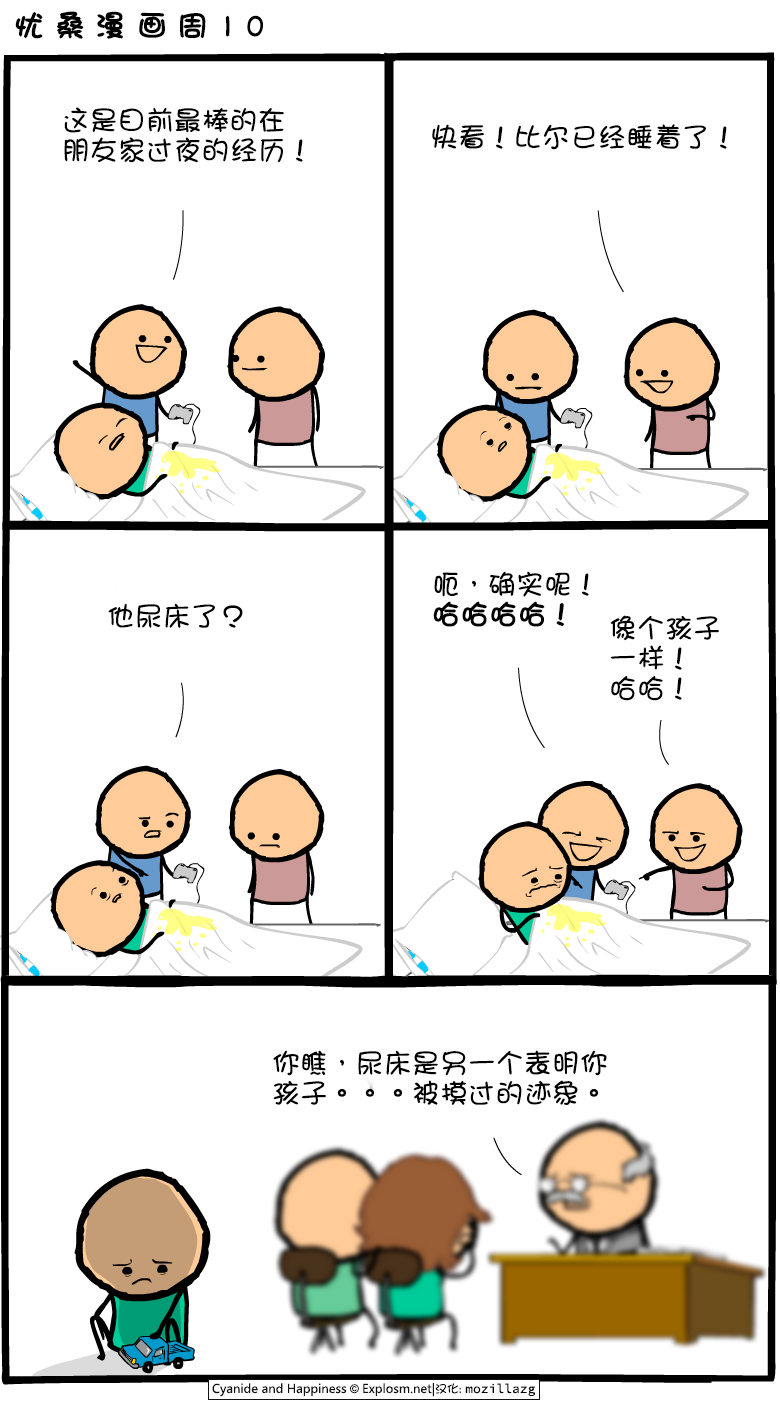
<style>
.page{position:relative;width:780px;height:1405px;background:#ffffff}
.page>*{position:absolute;margin:0}
.t1{font:30px "DFGirl";letter-spacing:0.34em;color:#000000;font-weight:bold}
.t2{font:28px/30px "DFGirl";color:#000000}
.t3{font:28px "DFGirl";color:#000000}
.t4{font:28px/30px "DFGirl";color:#000000;font-weight:bold}
</style>
<div class="page">
<p class="t1" style="left:15px;top:11px;width:248px;height:28px">忧桑漫画周10</p>
<p class="t2" style="left:64px;top:107px;width:239px;height:56px">这是目前最棒的在<br>朋友家过夜的经历！</p>
<p class="t3" style="left:432px;top:124px;width:295px;height:26px">快看！比尔已经睡着了！</p>
<p class="t2" style="left:433px;top:571px;width:156px;height:56px">呃，确实呢！<br><span class="t4">哈哈哈哈！</span></p>
<p class="t3" style="left:108px;top:603px;width:135px;height:25px">他尿床了？</p>
<p class="t2" style="left:610px;top:615px;width:109px;height:86px">像个孩子<br>一样！<br>哈哈！</p>
<p class="t2" style="left:273px;top:1050px;width:334px;height:55px">你瞧，尿床是另一个表明你<br>孩子。。。被摸过的迹象。</p>
</div>
